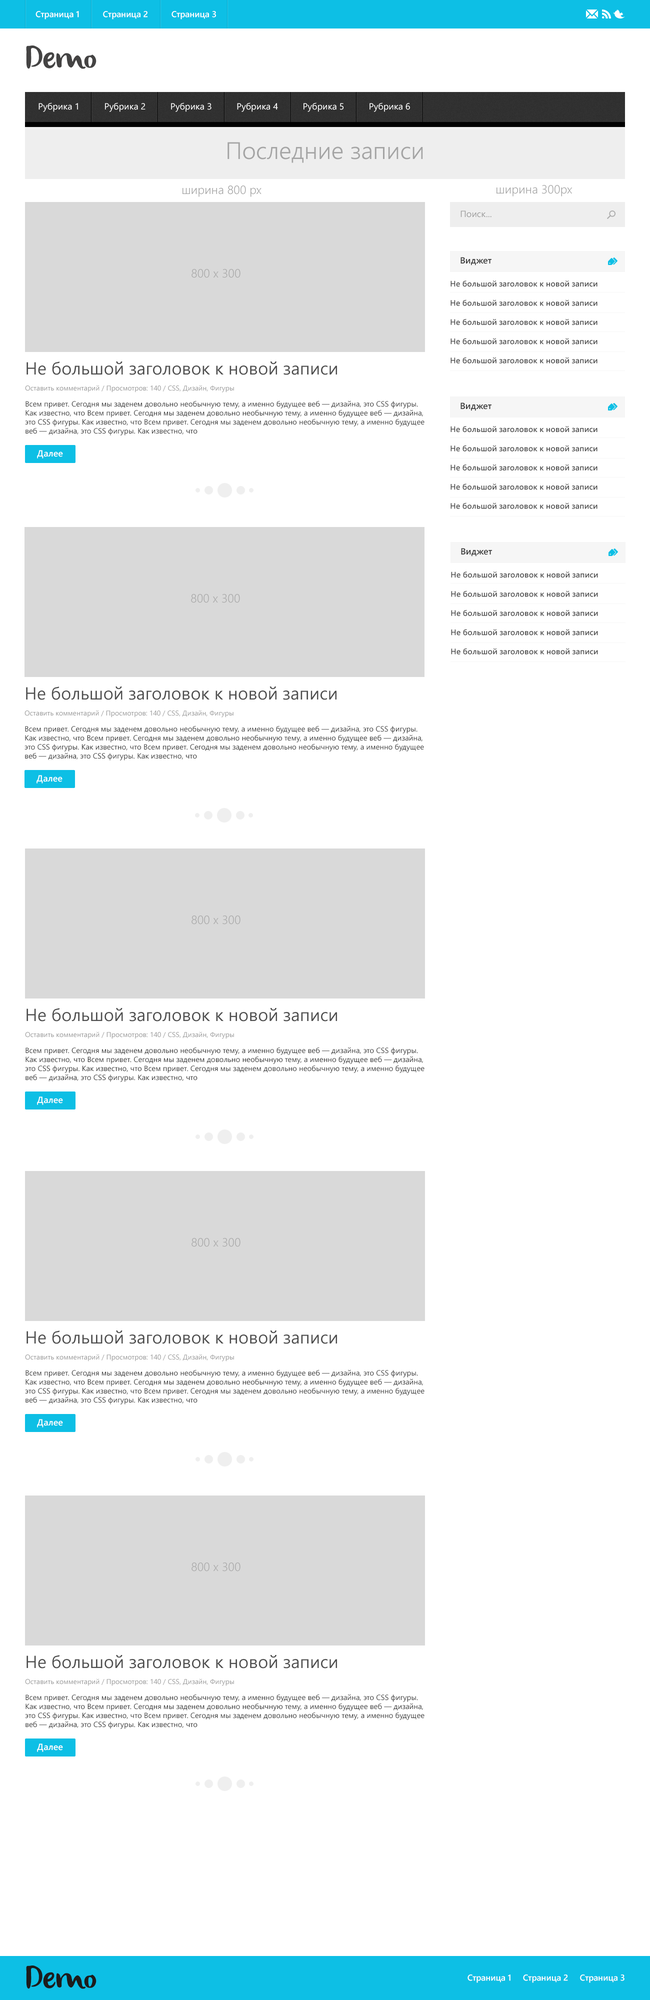
<style>
.page{position:relative;width:650px;height:2000px;background:#ffffff}
.page>*{position:absolute;margin:0}
.t1{font:8.5px "SegoeUI-Semibold";color:#ffffff}
.t2{font:32.5px "olivier";color:#444343}
.t3{font:9px "SegoeUI";color:#ffffff}
.t4{font:24px "SegoeUI-Semilight";color:#a4a4a4}
.t5{font:12px "SegoeUI-Semilight";color:#a4a4a4}
.t6{font:9px "SegoeUI";color:#9d9d9d}
.t7{font:9px "SegoeUI-Semibold";color:#3d3d3d}
.t8{font:12px "SegoeUI-Semilight";color:#aaaaaa}
.t9{font:8px "SegoeUI-Semibold";color:#4e4e4e}
.t10{font:17.5px "SegoeUI";color:#4e4e4e}
.t11{font:7px "SegoeUI";color:#9c9c9c}
.t12{font:7.5px "SegoeUI";color:#2e2e2e}
.t13{font:9px "SegoeUI-Semibold";color:#ffffff}
.t14{font:32.5px "olivier";color:#1c1c1c}
</style>
<div class="page">
<p class="t1" style="left:36px;top:11px;width:180px;height:9px">Страница 1          Страница 2          Страница 3</p>
<p class="t2" style="left:26px;top:46px;width:70px;height:23px">Demo</p>
<p class="t3" style="left:38px;top:102px;width:372px;height:10px">Рубрика 1          Рубрика 2          Рубрика 3          Рубрика 4          Рубрика 5          Рубрика 6</p>
<p class="t4" style="left:228px;top:142px;width:195px;height:21px">Последние записи</p>
<p class="t5" style="left:182px;top:186px;width:80px;height:11px">ширина 800 рх</p>
<p class="t5" style="left:496px;top:185px;width:76px;height:11px">ширина 300рх</p>
<p class="t6" style="left:460px;top:210px;width:32px;height:8px">Поиск...</p>
<p class="t7" style="left:460px;top:257px;width:32px;height:9px">Виджет</p>
<p class="t8" style="left:192px;top:269px;width:48px;height:9px">800 х 300</p>
<p class="t9" style="left:450px;top:280px;width:148px;height:84px">Не большой заголовок к новой записи<br><br>Не большой заголовок к новой записи<br><br>Не большой заголовок к новой записи<br><br>Не большой заголовок к новой записи<br><br>Не большой заголовок к новой записи</p>
<p class="t10" style="left:26px;top:362px;width:311px;height:13px">Не большой заголовок к новой записи</p>
<p class="t11" style="left:25px;top:385px;width:209px;height:7px">Оставить комментарий / Просмотров: 140 / CSS, Дизайн, Фигуры</p>
<p class="t12" style="left:25px;top:400px;width:399px;height:36px">Всем привет. Сегодня мы заденем довольно необычную тему, а именно будущее веб — дизайна, это CSS фигуры. <br>Как известно, что Всем привет. Сегодня мы заденем довольно необычную тему, а именно будущее веб — дизайна, <br>это CSS фигуры. Как известно, что Всем привет. Сегодня мы заденем довольно необычную тему, а именно будущее <br>веб — дизайна, это CSS фигуры. Как известно, что</p>
<p class="t7" style="left:460px;top:402px;width:32px;height:9px">Виджет</p>
<p class="t9" style="left:450px;top:426px;width:148px;height:83px">Не большой заголовок к новой записи<br><br>Не большой заголовок к новой записи<br><br>Не большой заголовок к новой записи<br><br>Не большой заголовок к новой записи<br><br>Не большой заголовок к новой записи</p>
<p class="t13" style="left:37px;top:450px;width:26px;height:8px">Далее</p>
<p class="t7" style="left:461px;top:548px;width:31px;height:8px">Виджет</p>
<p class="t9" style="left:451px;top:572px;width:147px;height:82px">Не большой заголовок к новой записи<br><br>Не большой заголовок к новой записи<br><br>Не большой заголовок к новой записи<br><br>Не большой заголовок к новой записи<br><br>Не большой заголовок к новой записи</p>
<p class="t8" style="left:191px;top:594px;width:49px;height:9px">800 х 300</p>
<p class="t10" style="left:26px;top:686px;width:310px;height:14px">Не большой заголовок к новой записи</p>
<p class="t11" style="left:24px;top:710px;width:210px;height:8px">Оставить комментарий / Просмотров: 140 / CSS, Дизайн, Фигуры</p>
<p class="t12" style="left:24px;top:726px;width:400px;height:34px">Всем привет. Сегодня мы заденем довольно необычную тему, а именно будущее веб — дизайна, это CSS фигуры. <br>Как известно, что Всем привет. Сегодня мы заденем довольно необычную тему, а именно будущее веб — дизайна, <br>это CSS фигуры. Как известно, что Всем привет. Сегодня мы заденем довольно необычную тему, а именно будущее <br>веб — дизайна, это CSS фигуры. Как известно, что</p>
<p class="t13" style="left:36px;top:775px;width:26px;height:9px">Далее</p>
<p class="t8" style="left:192px;top:916px;width:48px;height:8px">800 х 300</p>
<p class="t10" style="left:26px;top:1008px;width:311px;height:14px">Не большой заголовок к новой записи</p>
<p class="t11" style="left:25px;top:1032px;width:209px;height:7px">Оставить комментарий / Просмотров: 140 / CSS, Дизайн, Фигуры</p>
<p class="t12" style="left:25px;top:1047px;width:399px;height:35px">Всем привет. Сегодня мы заденем довольно необычную тему, а именно будущее веб — дизайна, это CSS фигуры. <br>Как известно, что Всем привет. Сегодня мы заденем довольно необычную тему, а именно будущее веб — дизайна, <br>это CSS фигуры. Как известно, что Всем привет. Сегодня мы заденем довольно необычную тему, а именно будущее <br>веб — дизайна, это CSS фигуры. Как известно, что</p>
<p class="t13" style="left:37px;top:1096px;width:26px;height:9px">Далее</p>
<p class="t8" style="left:192px;top:1238px;width:48px;height:9px">800 х 300</p>
<p class="t10" style="left:26px;top:1330px;width:311px;height:14px">Не большой заголовок к новой записи</p>
<p class="t11" style="left:25px;top:1354px;width:209px;height:8px">Оставить комментарий / Просмотров: 140 / CSS, Дизайн, Фигуры</p>
<p class="t12" style="left:25px;top:1370px;width:399px;height:34px">Всем привет. Сегодня мы заденем довольно необычную тему, а именно будущее веб — дизайна, это CSS фигуры. <br>Как известно, что Всем привет. Сегодня мы заденем довольно необычную тему, а именно будущее веб — дизайна, <br>это CSS фигуры. Как известно, что Всем привет. Сегодня мы заденем довольно необычную тему, а именно будущее <br>веб — дизайна, это CSS фигуры. Как известно, что</p>
<p class="t13" style="left:37px;top:1419px;width:26px;height:9px">Далее</p>
<p class="t8" style="left:192px;top:1562px;width:48px;height:10px">800 х 300</p>
<p class="t10" style="left:26px;top:1655px;width:311px;height:13px">Не большой заголовок к новой записи</p>
<p class="t11" style="left:25px;top:1678px;width:209px;height:8px">Оставить комментарий / Просмотров: 140 / CSS, Дизайн, Фигуры</p>
<p class="t12" style="left:25px;top:1694px;width:399px;height:35px">Всем привет. Сегодня мы заденем довольно необычную тему, а именно будущее веб — дизайна, это CSS фигуры. <br>Как известно, что Всем привет. Сегодня мы заденем довольно необычную тему, а именно будущее веб — дизайна, <br>это CSS фигуры. Как известно, что Всем привет. Сегодня мы заденем довольно необычную тему, а именно будущее <br>веб — дизайна, это CSS фигуры. Как известно, что</p>
<p class="t13" style="left:37px;top:1744px;width:26px;height:8px">Далее</p>
<p class="t14" style="left:26px;top:1966px;width:70px;height:23px">Demo</p>
<p class="t1" style="left:468px;top:1974px;width:156px;height:9px">Страница 1     Страница 2     Страница 3</p>
</div>
